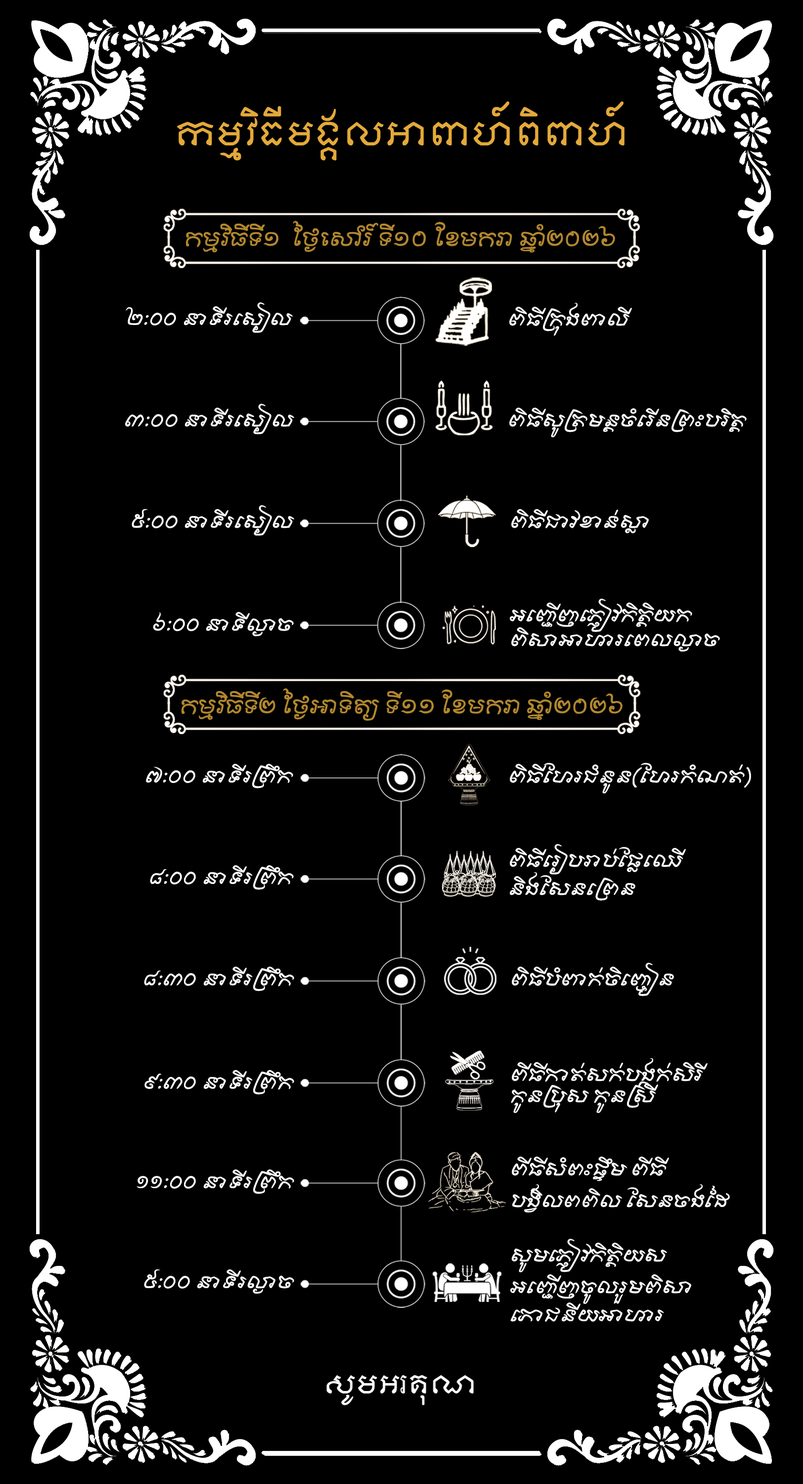
<style>
.page{position:relative;width:803px;height:1484px;background:#000000}
.page>*{position:absolute;margin:0}
.t1{font:32.2px/3.7px "KhmerOSMoulpali";color:#e3a93a}
.t2{font:20.8px "AKbalthomFreehand";color:#b1872f}
.t3{font:19.8px "AKbalthomKhmerHand";color:#ffffff}
.t4{font:19.8px/3.5px "AKbalthomKhmerHand";color:#ffffff}
</style>
<div class="page">
<p class="t1" style="left:177px;top:101px;width:448px;height:60px;text-align:center">កម្មវិធីមង្គលអាពាហ៍ពិពាហ៍</p>
<p class="t2" style="left:186px;top:221px;width:429px;height:32px">កម្មវិធីទី១  ថ្ងៃសៅរ៍ ទី១០ ខែមករា ឆ្នាំ២០២៦</p>
<p class="t3" style="left:126px;top:302px;width:167px;height:31px">២:០០ នាទីរសៀល</p>
<p class="t3" style="left:510px;top:303px;width:122px;height:33px">ពិធីក្រុងពាលី</p>
<p class="t3" style="left:125px;top:404px;width:169px;height:30px">៣:០០ នាទីរសៀល</p>
<p class="t3" style="left:510px;top:408px;width:237px;height:29px">ពិធីសូត្រមន្តចំរើនព្រះបរិត្ត</p>
<p class="t3" style="left:132px;top:505px;width:162px;height:31px">៥:០០ នាទីរសៀល</p>
<p class="t3" style="left:512px;top:509px;width:137px;height:24px">ពិធីជាវខាន់ស្លា</p>
<p class="t4" style="left:510px;top:599px;width:210px;height:53px">អញ្ជើញភ្ញៀវកិត្តិយក<br><br><br><br><br><br><br>ពិសាអាហារពេលល្ងាច</p>
<p class="t3" style="left:153px;top:612px;width:141px;height:25px">៦:០០ នាទីល្ងាច</p>
<p class="t2" style="left:182px;top:688px;width:441px;height:33px">កម្មវិធីទី២ ថ្ងៃអាទិត្យ ទី១១ ខែមករា ឆ្នាំ២០២៦</p>
<p class="t3" style="left:146px;top:764px;width:147px;height:25px">៧:០០ នាទីរព្រឹក</p>
<p class="t3" style="left:510px;top:763px;width:241px;height:31px">ពិធីហែរជំនូន(ហែរកំណត់)</p>
<p class="t4" style="left:510px;top:844px;width:176px;height:57px">ពិធីរៀបរាប់ផ្លែឈើ<br><br><br><br><br><br><br><br>និងសែនព្រេន</p>
<p class="t3" style="left:150px;top:865px;width:144px;height:25px">៨:០០ នាទីរព្រឹក</p>
<p class="t4" style="left:512px;top:963px;width:162px;height:33px">ពិធីបំពាក់ចិញ្ចៀន</p>
<p class="t3" style="left:144px;top:967px;width:150px;height:24px">៨:៣០ នាទីរព្រឹក</p>
<p class="t4" style="left:511px;top:1058px;width:197px;height:55px">ពីធីកាត់សក់បង្កក់សិរី​​​​<br><br><br><br><br><br>កូនប្រុស កូនស្រី</p>
<p class="t3" style="left:144px;top:1070px;width:150px;height:25px">៩:៣០ នាទីរព្រឹក</p>
<p class="t4" style="left:512px;top:1157px;width:218px;height:56px">ពីធីសំពះផ្ទឹម ពីធី<br><br><br><br><br><br><br><br><br>បង្វិលពពិល សែនចងដៃ</p>
<p class="t3" style="left:137px;top:1170px;width:157px;height:24px">១១:០០ នាទីរព្រឹក</p>
<p class="t4" style="left:511px;top:1239px;width:181px;height:83px">សូមភ្ញៀវកិត្តិយស<br><br><br><br><br><br><br><br><br>អញ្ជើញចូលរួមពិសា<br><br><br><br><br><br><br><br>ភោជនីយអាហារ</p>
<p class="t3" style="left:144px;top:1269px;width:150px;height:25px">៥:០០ នាទីរល្ងាច</p>
</div>
